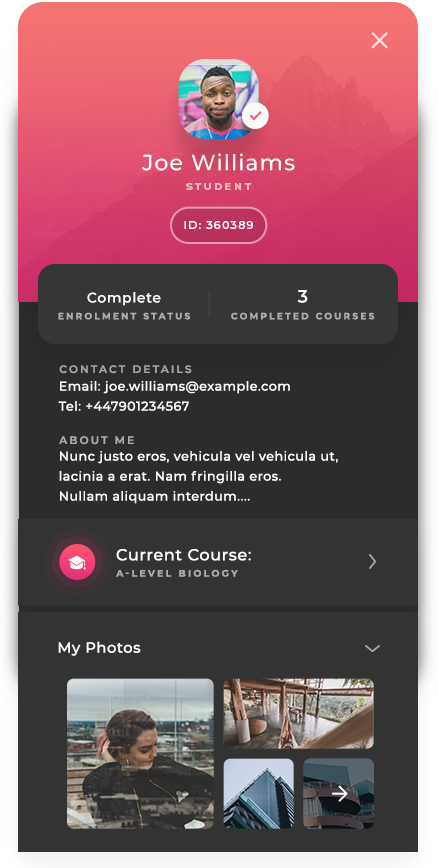
<style>
.page{position:relative;width:438px;height:868px;background:#333333}
.page>*{position:absolute;margin:0}
.t1{font:22px "Montserrat-Medium";letter-spacing:0.05em;color:#ffffff}
.t2{font:10px "Montserrat-Bold";letter-spacing:0.25em;color:#ebbcc4;text-transform:uppercase}
.t3{font:11.3px "Montserrat-Medium";letter-spacing:0.1em;color:#ffffff}
.t4{font:14px "Montserrat-SemiBold";letter-spacing:0.04em;color:#ffffff}
.t5{font:18px "Montserrat-SemiBold";letter-spacing:0.05em;color:#ffffff}
.t6{font:9px "Montserrat-Bold";letter-spacing:0.25em;color:#aeaeae;text-transform:uppercase}
.t7{font:10.7px "Montserrat-SemiBold";letter-spacing:0.2em;color:#a7a7a7;text-transform:uppercase}
.t8{font:12.7px/20px "Montserrat-Medium";letter-spacing:0.04em;color:#ffffff}
.t9{font:10.7px "Montserrat-SemiBold";letter-spacing:0.2em;color:#acacac;text-transform:uppercase}
.t10{font:16px "Montserrat-Medium";letter-spacing:0.04em;color:#ffffff}
.t11{font:9.3px "Montserrat-Bold";letter-spacing:0.25em;color:#acacac;text-transform:uppercase}
.t12{font:14.7px "Montserrat-Medium";letter-spacing:0.04em;color:#ffffff}
</style>
<div class="page">
<p class="t1" style="left:142px;top:153px;width:153px;height:18px">Joe Williams</p>
<p class="t2" style="left:186px;top:183px;width:66px;height:7px">Student</p>
<p class="t3" style="left:184px;top:221px;width:69px;height:8px">ID: 360389</p>
<p class="t4" style="left:87px;top:292px;width:74px;height:14px">Complete</p>
<p class="t5" style="left:297px;top:290px;width:11px;height:13px">3</p>
<p class="t6" style="left:58px;top:312px;width:132px;height:8px">enrolment Status</p>
<p class="t6" style="left:231px;top:312px;width:144px;height:8px">completed courses</p>
<p class="t7" style="left:59px;top:365px;width:133px;height:9px">Contact Details</p>
<p class="t8" style="left:58px;top:381px;width:232px;height:30px">Email: joe.williams@example.com<br>Tel: +447901234567</p>
<p class="t9" style="left:59px;top:436px;width:75px;height:9px">About me</p>
<p class="t8" style="left:59px;top:451px;width:279px;height:53px">Nunc justo eros, vehicula vel vehicula ut, lacinia a erat. Nam fringilla eros.<br>Nullam aliquam interdum....</p>
<p class="t10" style="left:116px;top:549px;width:135px;height:12px">Current Course:</p>
<p class="t11" style="left:116px;top:569px;width:122px;height:8px">A-Level Biology</p>
<p class="t12" style="left:58px;top:641px;width:83px;height:15px">My Photos</p>
</div>
